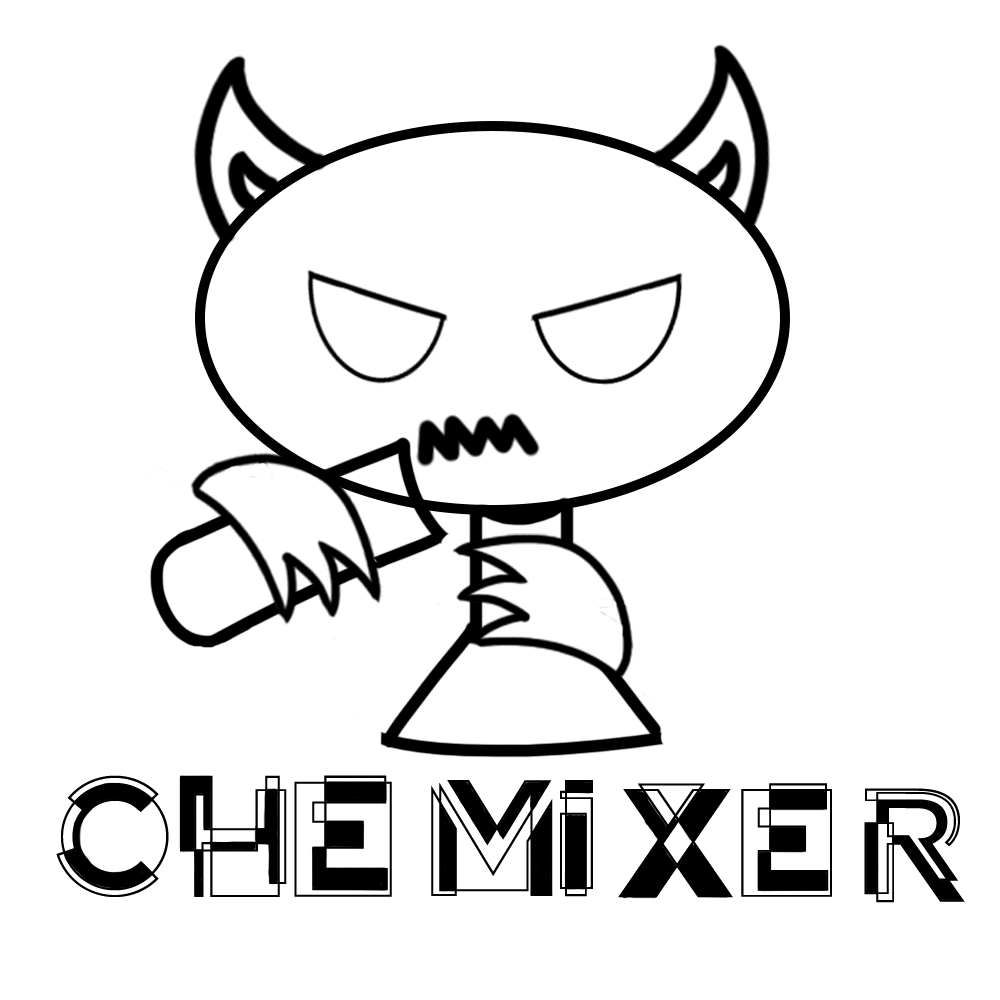
<style>
.page{position:relative;width:1000px;height:1000px;background:#ffffff}
.page>*{position:absolute;margin:0}
.t1{font:173.3px "TESLA";color:#000000}
.t2{font:166px "TESLA";color:#000000}
.t3{font:162.3px "TESLA";color:#000000}
</style>
<div class="page">
<p class="t1" style="left:56px;top:775px;width:336px;height:122px">CHE</p>
<p class="t2" style="left:431px;top:780px;width:162px;height:117px">MI</p>
<p class="t3" style="left:618px;top:783px;width:214px;height:115px">XE</p>
<p class="t3" style="left:864px;top:788px;width:101px;height:115px">R</p>
</div>
